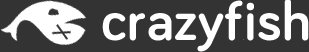
<style>
.page{position:relative;width:309px;height:52px;background:#333333}
.page>*{position:absolute;margin:0}
.t1{font:57.5px "Bariol-Bold";letter-spacing:0.01em;color:#ffffff}
.t2{font:1px "Bariol-Bold";letter-spacing:0.01em;color:#ffffff}
</style>
<div class="page">
<p class="t1" style="left:102px;top:0px;width:207px;height:52px">crazyf<span class="t2">1</span>ish</p>
</div>
